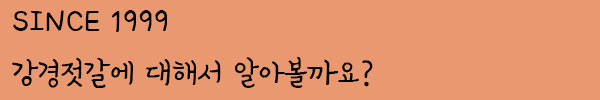
<style>
.page{position:relative;width:600px;height:100px;background:#e9986f}
.page>*{position:absolute;margin:0}
.t1{font:30px "KCC-Chassam";color:#000000}
</style>
<div class="page">
<p class="t1" style="left:12px;top:10px;width:361px;height:78px">SINCE 1999<br>강경젓갈에 대해서 알아볼까요?</p>
</div>
